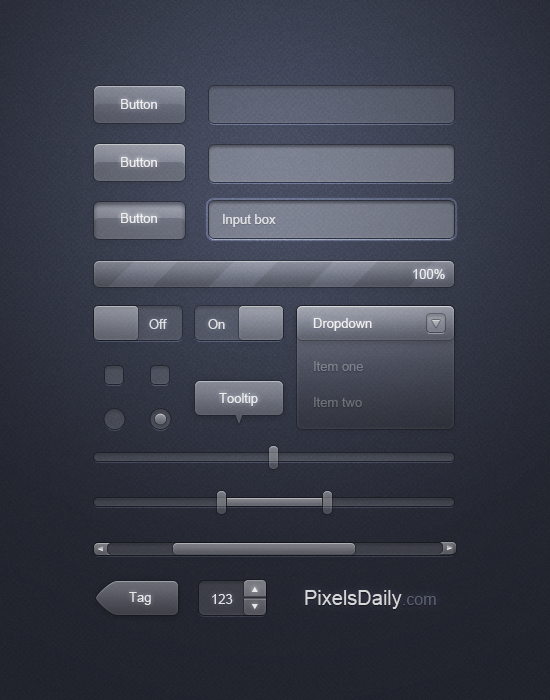
<style>
.page{position:relative;width:550px;height:700px}
.page>*{position:absolute;margin:0}
.t1{font:13px "ArialMT";color:#ffffff}
.t2{font:13px "ArialMT";color:#dfe0e2}
.t3{font:13px "ArialMT";color:#dddde0}
.t4{font:13px "ArialMT";color:#dfdfe1}
.t5{font:13px/36px "ArialMT";color:#7a7c88}
.t6{font:13px "ArialMT";color:#e7e7e8}
.t7{font:20px "ArialMT";color:#d6d6d8}
.t8{font:16px "ArialMT";color:#d6d6d8}
.t9{font:13px "ArialMT";color:#e3e3e5}
</style>
<div class="page">
<p class="t1" style="left:121px;top:99px;width:36px;height:10px">Button</p>
<p class="t1" style="left:121px;top:157px;width:36px;height:10px">Button</p>
<p class="t1" style="left:121px;top:213px;width:36px;height:10px">Button</p>
<p class="t2" style="left:223px;top:214px;width:53px;height:13px">Input box</p>
<p class="t1" style="left:413px;top:269px;width:32px;height:10px">100%</p>
<p class="t1" style="left:313px;top:318px;width:59px;height:13px">Dropdown</p>
<p class="t3" style="left:149px;top:319px;width:18px;height:10px">Off</p>
<p class="t4" style="left:208px;top:319px;width:17px;height:10px">On</p>
<p class="t5" style="left:314px;top:361px;width:49px;height:46px">Item one<br>Item two</p>
<p class="t1" style="left:219px;top:393px;width:39px;height:13px">Tooltip</p>
<p class="t6" style="left:129px;top:592px;width:22px;height:13px">Tag</p>
<p class="t7" style="left:305px;top:590px;width:131px;height:19px">PixelsDaily<span class="t8">.com</span></p>
<p class="t9" style="left:212px;top:594px;width:21px;height:10px">123</p>
</div>
